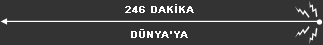
<style>
.page{position:relative;width:323px;height:45px;background:#333333}
.page>*{position:absolute;margin:0}
.t1{font:10px "Arial-BoldMT";color:#ffffff;font-weight:bold}
</style>
<div class="page">
<p class="t1" style="left:125px;top:4px;width:69px;height:9px">246 DAKİKA</p>
<p class="t1" style="left:131px;top:29px;width:57px;height:9px">DÜNYA’YA</p>
</div>
